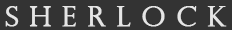
<style>
.page{position:relative;width:232px;height:30px;background:#333333}
.page>*{position:absolute;margin:0}
.t1{font:28px "PerpetuaTitlingMT-Light";color:#e5e5e5;font-weight:bold}
</style>
<div class="page">
<p class="t1" style="left:5px;top:6px;width:222px;height:21px">S H E R L O C K</p>
</div>
